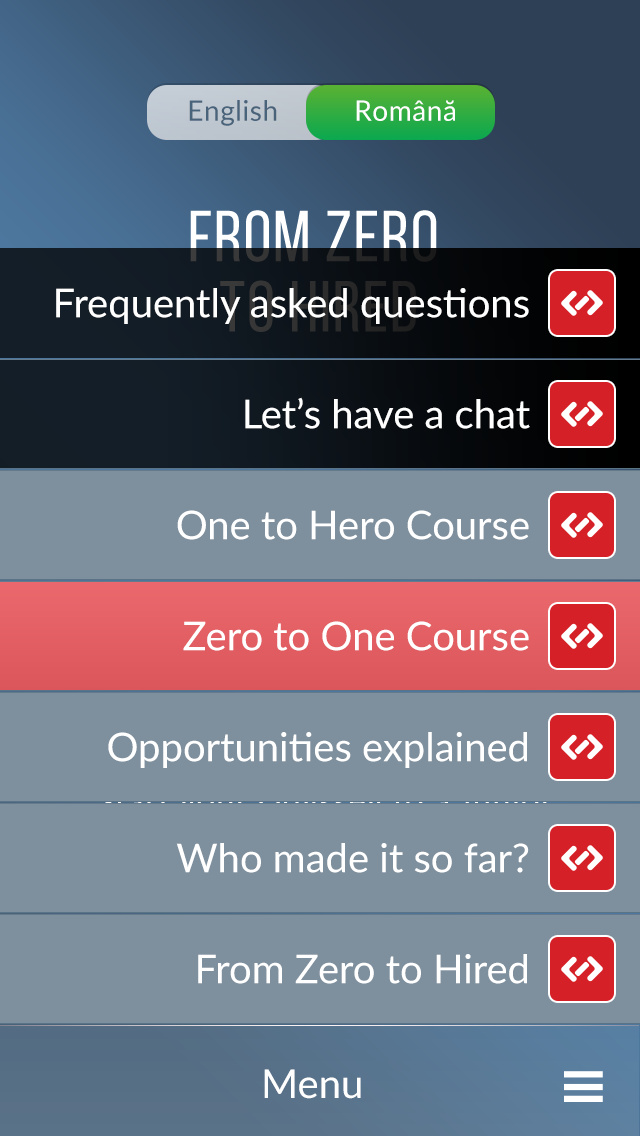
<style>
.page{position:relative;width:640px;height:1136px;background:#7e8f9d}
.page>*{position:absolute;margin:0}
.t1{font:28px "Lato-Regular";letter-spacing:0.02em;color:#49637b}
.t2{font:28px "Lato-Regular";letter-spacing:0.02em;color:#ffffff}
.t3{font:72px/70px "BebasNeueRegular";letter-spacing:0.02em;text-transform:uppercase}
.t4{font:40px "Lato-Regular";color:#ffffff}
</style>
<div class="page">
<p class="t1" style="left:189px;top:100px;width:88px;height:26px">English</p>
<p class="t2" style="left:356px;top:100px;width:99px;height:21px">Română</p>
<p class="t3" style="left:190px;top:210px;width:247px;height:122px;text-align:center">from zero <br>to hired</p>
<p class="t4" style="left:56px;top:288px;width:473px;height:36px">Frequently asked questions</p>
<p class="t4" style="left:245px;top:397px;width:285px;height:32px">Let’s have a chat</p>
<p class="t4" style="left:177px;top:510px;width:352px;height:30px">One to Hero Course</p>
<p class="t4" style="left:183px;top:621px;width:346px;height:30px">Zero to One Course</p>
<p class="t4" style="left:108px;top:732px;width:419px;height:36px">Opportunities explained</p>
<p class="t4" style="left:176px;top:843px;width:353px;height:30px">Who made it so far?</p>
<p class="t4" style="left:198px;top:954px;width:329px;height:30px">From Zero to Hired</p>
<p class="t4" style="left:264px;top:1069px;width:97px;height:30px">Menu</p>
</div>
